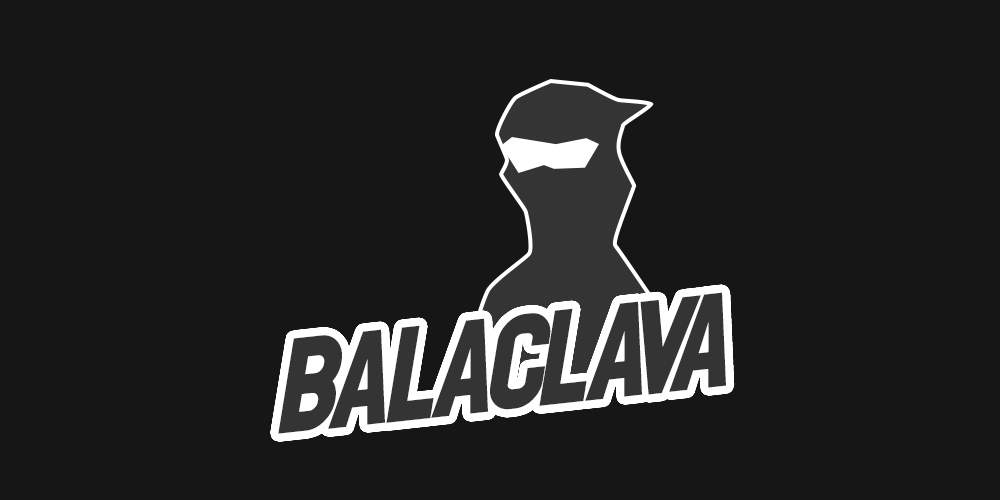
<style>
.page{position:relative;width:1000px;height:500px;background:#161616}
.page>*{position:absolute;margin:0}
.t1{font:111.2px "GEORGEA";letter-spacing:-0.08em;color:#343434;scale:0.87 1}
</style>
<div class="page">
<p class="t1" style="left:278px;top:292px;width:448px;height:142px;rotate:-6deg">BALACLAVA</p>
</div>
